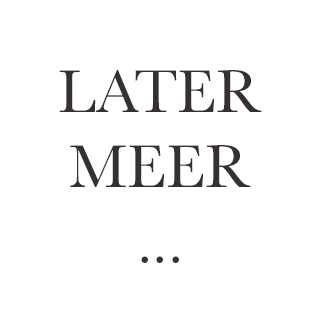
<style>
.page{position:relative;width:320px;height:320px;background:#ffffff}
.page>*{position:absolute;margin:0}
.t1{font:62.5px "Baskerville";color:#363032;text-transform:uppercase}
</style>
<div class="page">
<p class="t1" style="left:59px;top:70px;width:203px;height:193px;text-align:center">LATEr<br>MEEr<br>...</p>
</div>
